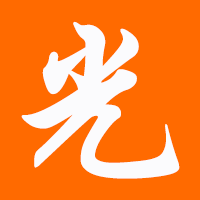
<style>
.page{position:relative;width:200px;height:200px;background:#ff6a00}
.page>*{position:absolute;margin:0}
.t1{font:180.5px "STXingkai";letter-spacing:0.001em;color:#fbfbfd;scale:1.1 1}
</style>
<div class="page">
<p class="t1" style="left:21px;top:21px;width:159px;height:158px">光</p>
</div>
